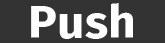
<style>
.page{position:relative;width:165px;height:43px;background:#333333}
.page>*{position:absolute;margin:0}
.t1{font:45.6px "FiraSans-Bold";color:#ffffff;scale:1.05 1}
</style>
<div class="page">
<p class="t1" style="left:31px;top:3px;width:102px;height:36px">Push</p>
</div>
